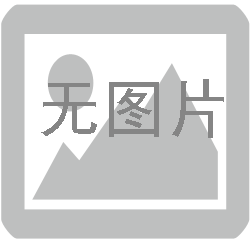
<style>
.page{position:relative;width:252px;height:252px;background:#bebfbf}
.page>*{position:absolute;margin:0}
.t1{font:64.1px "SimHei";color:#858585}
</style>
<div class="page">
<p class="t1" style="left:41px;top:79px;width:183px;height:59px">无图片</p>
</div>
